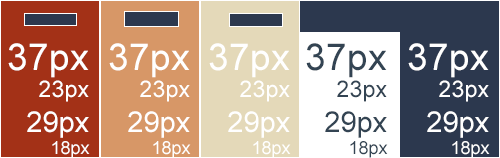
<style>
.page{position:relative;width:500px;height:158px;background:#2c384e}
.page>*{position:absolute;margin:0}
.t1{font:37px "ArialMT";color:#ffffff}
.t2{font:23px "ArialMT";color:#ffffff}
.t3{font:29px "ArialMT";color:#ffffff}
.t4{font:18px "ArialMT";color:#ffffff}
.t5{font:37px "ArialMT";color:#334453}
.t6{font:23px "ArialMT";color:#334453}
.t7{font:29px "ArialMT";color:#334453}
.t8{font:18px "ArialMT";color:#334453}
</style>
<div class="page">
<p class="t1" style="left:8px;top:43px;width:82px;height:115px;text-align:right">37px<br><span class="t2">23px<br></span><span class="t3">29px<br></span><span class="t4">18px</span></p>
<p class="t1" style="left:109px;top:43px;width:82px;height:115px;text-align:right">37px<br><span class="t2">23px<br></span><span class="t3">29px<br></span><span class="t4">18px</span></p>
<p class="t1" style="left:209px;top:43px;width:82px;height:115px;text-align:right">37px<br><span class="t2">23px<br></span><span class="t3">29px<br></span><span class="t4">18px</span></p>
<p class="t5" style="left:306px;top:43px;width:82px;height:115px;text-align:right">37px<br><span class="t6">23px<br></span><span class="t7">29px<br></span><span class="t8">18px</span></p>
<p class="t1" style="left:408px;top:43px;width:82px;height:115px;text-align:right">37px<br><span class="t2">23px<br></span><span class="t3">29px<br></span><span class="t4">18px</span></p>
</div>
